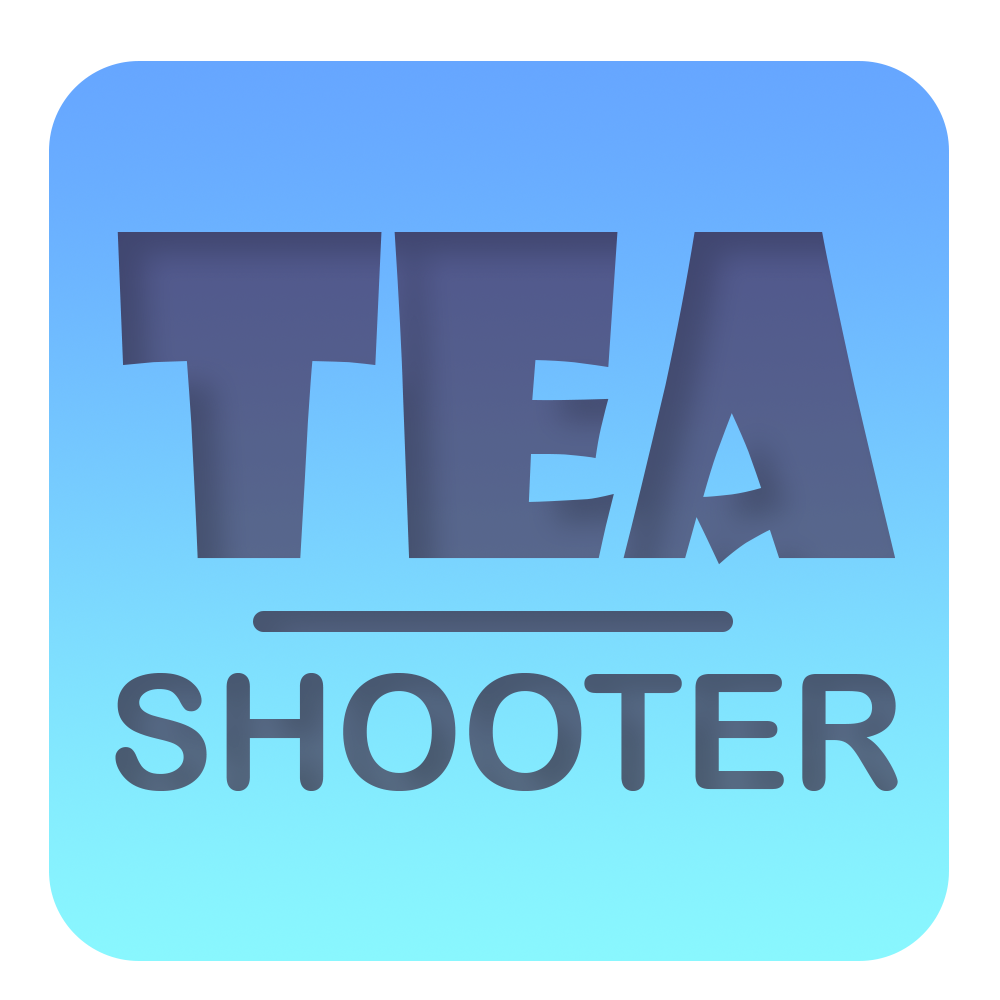
<style>
.page{position:relative;width:1000px;height:1000px}
.page>*{position:absolute;margin:0}
.t1{font:434px "ShowcardGothic-Reg";color:#525c8c}
.t2{font:160px "ArialRoundedMTBold";color:#4f6079;text-transform:uppercase}
</style>
<div class="page">
<p class="t1" style="left:117px;top:232px;width:778px;height:333px">TEA</p>
<p class="t2" style="left:115px;top:673px;width:783px;height:118px">Shooter</p>
</div>
